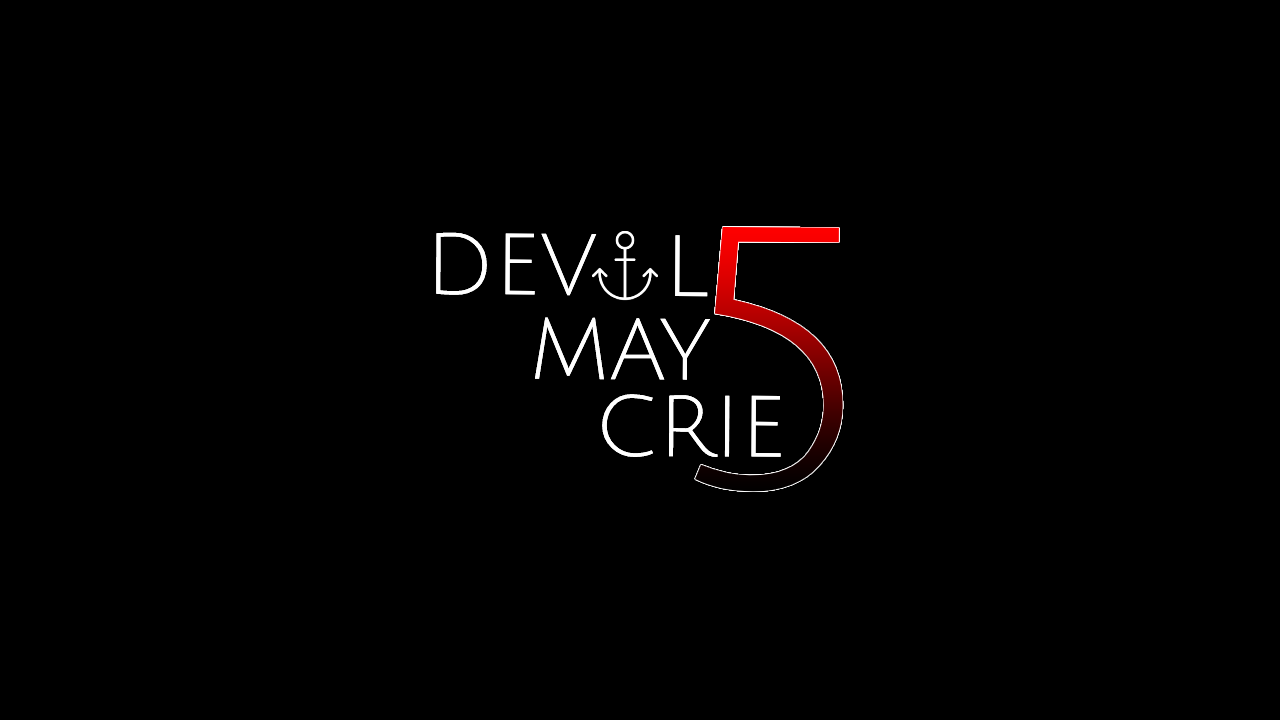
<style>
.page{position:relative;width:1280px;height:720px;background:#000000}
.page>*{position:absolute;margin:0}
.t1{font:85px "JuliusSansOne-Regular";color:#ffffff}
.t2{font:363.3px "JuliusSansOne-Regular"}
</style>
<div class="page">
<p class="t1" style="left:436px;top:232px;width:161px;height:64px">DEV</p>
<p class="t1" style="left:436px;top:232px;width:161px;height:64px">DEV</p>
<p class="t2" style="left:695px;top:227px;width:148px;height:265px">5</p>
<p class="t2" style="left:695px;top:227px;width:148px;height:265px">5</p>
<p class="t1" style="left:675px;top:235px;width:33px;height:62px">L</p>
<p class="t1" style="left:675px;top:235px;width:33px;height:62px">L</p>
<p class="t1" style="left:534px;top:317px;width:177px;height:63px">MAY</p>
<p class="t1" style="left:534px;top:317px;width:177px;height:63px">MAY</p>
<p class="t1" style="left:602px;top:394px;width:179px;height:64px">CRIE</p>
<p class="t1" style="left:602px;top:394px;width:179px;height:64px">CRIE</p>
</div>
